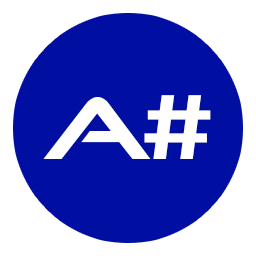
<style>
.page{position:relative;width:256px;height:256px;background:#000fa1}
.page>*{position:absolute;margin:0}
.t1{font:90px "GoodTimes";letter-spacing:-0.065em;color:#ffffff;scale:1.29 1}
.t2{font:100px "Consolas-Bold";letter-spacing:-0.065em;color:#ffffff;scale:1.29 1}
</style>
<div class="page">
<p class="t1" style="left:43px;top:97px;width:108px;height:62px">A</p>
<p class="t2" style="left:144px;top:95px;width:67px;height:64px">#</p>
</div>
